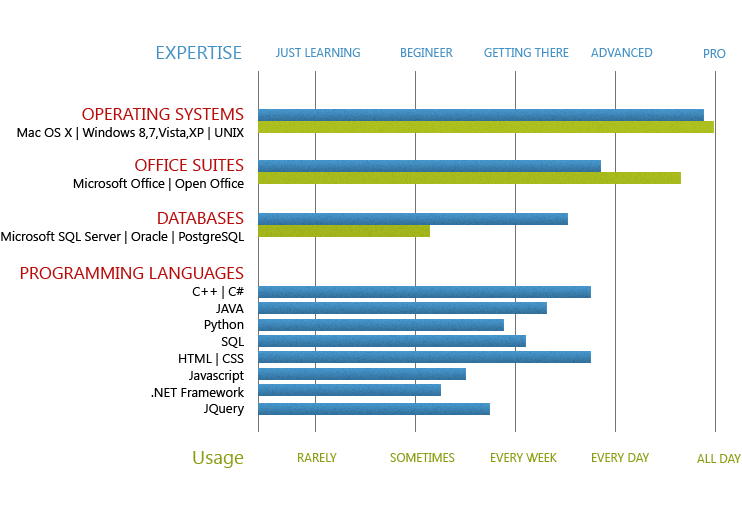
<style>
.page{position:relative;width:742px;height:508px;background:#ffffff}
.page>*{position:absolute;margin:0}
.t1{font:19px "SegoeUI";color:#4695c8}
.t2{font:12px "SegoeUI";color:#4695c8}
.t3{font:12px "SegoeUI";color:#4594c8}
.t4{font:12px "SegoeUI";color:#4694c8}
.t5{font:13px/16.8px "SegoeUI";color:#000000}
.t6{font:17px/16.8px "SegoeUI";color:#ba0b0b}
.t7{font:19px "SegoeUI";color:#8fa112}
.t8{font:12px "SegoeUI";color:#8fa112}
.t9{font:12px "SegoeUI";color:#8c9e11}
.t10{font:12px "SegoeUI";color:#8fa012}
</style>
<div class="page">
<p class="t1" style="left:156px;top:46px;width:86px;height:13px">EXPERTISE</p>
<p class="t2" style="left:276px;top:48px;width:84px;height:9px">JUST LEARNING</p>
<p class="t2" style="left:401px;top:48px;width:52px;height:9px">BEGINEER</p>
<p class="t2" style="left:484px;top:48px;width:85px;height:9px">GETTING THERE</p>
<p class="t3" style="left:591px;top:48px;width:62px;height:9px">ADVANCED</p>
<p class="t4" style="left:704px;top:49px;width:22px;height:9px">PRO</p>
<p class="t5" style="left:17px;top:108px;width:227px;height:32px;text-align:right"><span class="t6">OPERATING SYSTEMS<br></span>Mac OS X | Windows 8,7,Vista,XP | UNIX</p>
<p class="t5" style="left:73px;top:159px;width:171px;height:32px;text-align:right"><span class="t6">OFFICE SUITES<br></span>Microsoft Office | Open Office</p>
<p class="t5" style="left:1px;top:212px;width:243px;height:32px;text-align:right"><span class="t6">DATABASES<br></span>Microsoft SQL Server | Oracle | PostgreSQL</p>
<p class="t5" style="left:20px;top:267px;width:224px;height:149px;text-align:right"><span class="t6">PROGRAMMING LANGUAGES<br></span>C++ | C#<br>JAVA<br>Python<br>SQL<br>HTML | CSS<br>Javascript<br>.NET Framework<br>JQuery</p>
<p class="t7" style="left:193px;top:451px;width:51px;height:17px">Usage</p>
<p class="t8" style="left:298px;top:453px;width:39px;height:9px">RARELY</p>
<p class="t8" style="left:390px;top:453px;width:65px;height:9px">SOMETIMES</p>
<p class="t8" style="left:491px;top:453px;width:66px;height:9px">EVERY WEEK</p>
<p class="t9" style="left:592px;top:453px;width:57px;height:9px">EVERY DAY</p>
<p class="t10" style="left:697px;top:454px;width:44px;height:9px">ALL DAY</p>
</div>
